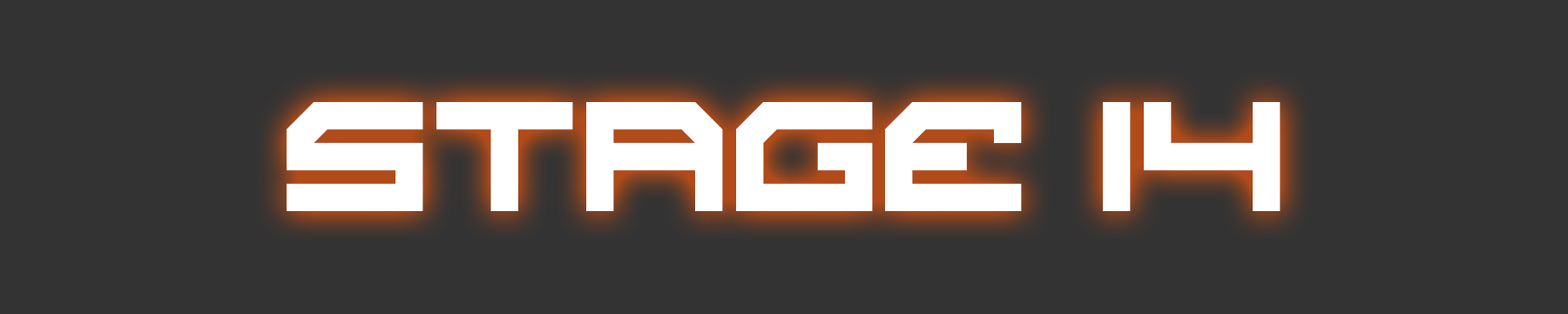
<style>
.page{position:relative;width:1568px;height:314px;background:#333333}
.page>*{position:absolute;margin:0}
.t1{font:108.9px "ScifiAdventure";color:#ffffff}
</style>
<div class="page">
<p class="t1" style="left:287px;top:102px;width:994px;height:109px">Stag£ 14</p>
</div>
